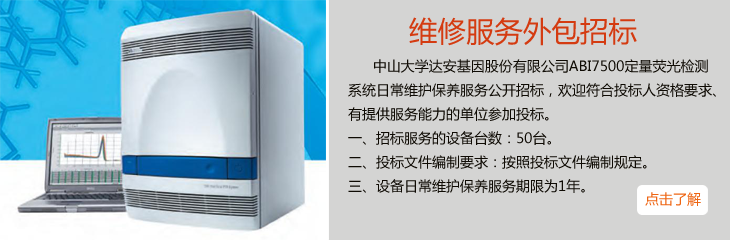
<style>
.page{position:relative;width:730px;height:240px;background:#d4d4d3}
.page>*{position:absolute;margin:0}
.t1{font:28.5px "MicrosoftYaHei";color:#d43b11}
.t2{font:14px/24px "MicrosoftYaHei";color:#0f0b04}
.t3{font:14px "MicrosoftYaHei";color:#ee6513}
</style>
<div class="page">
<p class="t1" style="left:409px;top:17px;width:228px;height:29px">维修服务外包招标</p>
<p class="t2" style="left:348px;top:59px;width:368px;height:134px">中山大学达安基因股份有限公司ABI7500定量荧光检测<br>系统日常维护保养服务公开招标，欢迎符合投标人资格要求、<br>有提供服务能力的单位参加投标。<br>一、招标服务的设备台数：50台。<br>二、投标文件编制要求：按照投标文件编制规定。<br>三、设备日常维护保养服务期限为1年。</p>
<p class="t3" style="left:645px;top:192px;width:56px;height:14px">点击了解</p>
</div>
